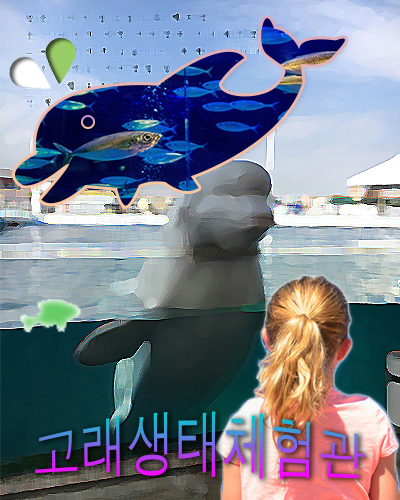
<style>
.page{position:relative;width:400px;height:500px}
.page>*{position:absolute;margin:0}
.t1{font:50px "Dotum";letter-spacing:-0.05em}
</style>
<div class="page">
<p class="t1" style="left:35px;top:411px;width:330px;height:68px">고래생태체험관</p>
</div>
